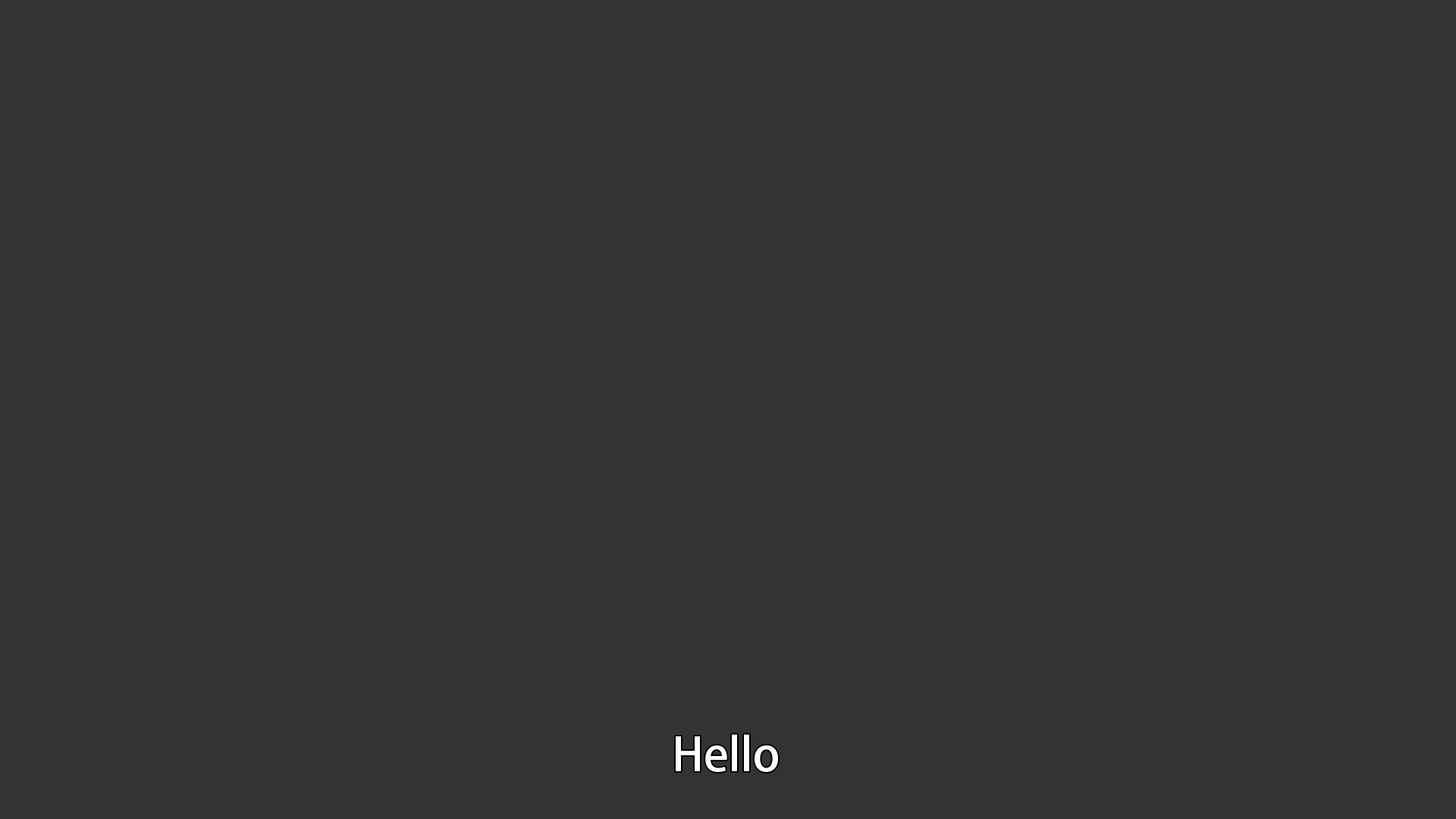
<style>
.page{position:relative;width:1456px;height:819px;background:#333333}
.page>*{position:absolute;margin:0}
.t1{font:45.5px "AdobeHeitiStd-Regular";color:#ffffff}
</style>
<div class="page">
<p class="t1" style="left:676px;top:734px;width:102px;height:38px">Hello</p>
</div>
